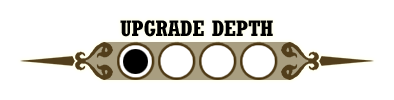
<style>
.page{position:relative;width:394px;height:100px;background:#ffffff}
.page>*{position:absolute;margin:0}
.t1{font:22.4px "Rockwell-CondensedBold";color:#000000}
</style>
<div class="page">
<p class="t1" style="left:120px;top:20px;width:153px;height:17px">UPGRADE DEPTH</p>
</div>
